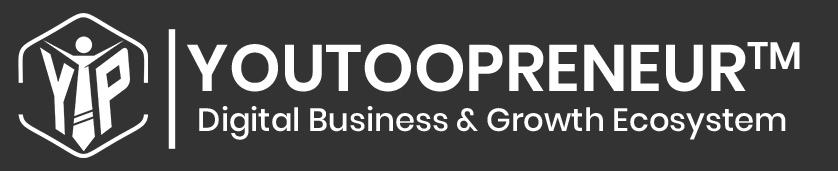
<style>
.page{position:relative;width:838px;height:171px;background:#333333}
.page>*{position:absolute;margin:0}
.t1{font:65.6px "Poppins-SemiBold";color:#ffffff}
.t2{font:32.1px "Poppins-Medium";color:#ffffff}
</style>
<div class="page">
<p class="t1" style="left:186px;top:42px;width:614px;height:50px">YOUTOOPRENEURTM</p>
<p class="t2" style="left:199px;top:106px;width:587px;height:34px">Digital Business &amp; Growth Ecosystem</p>
</div>
